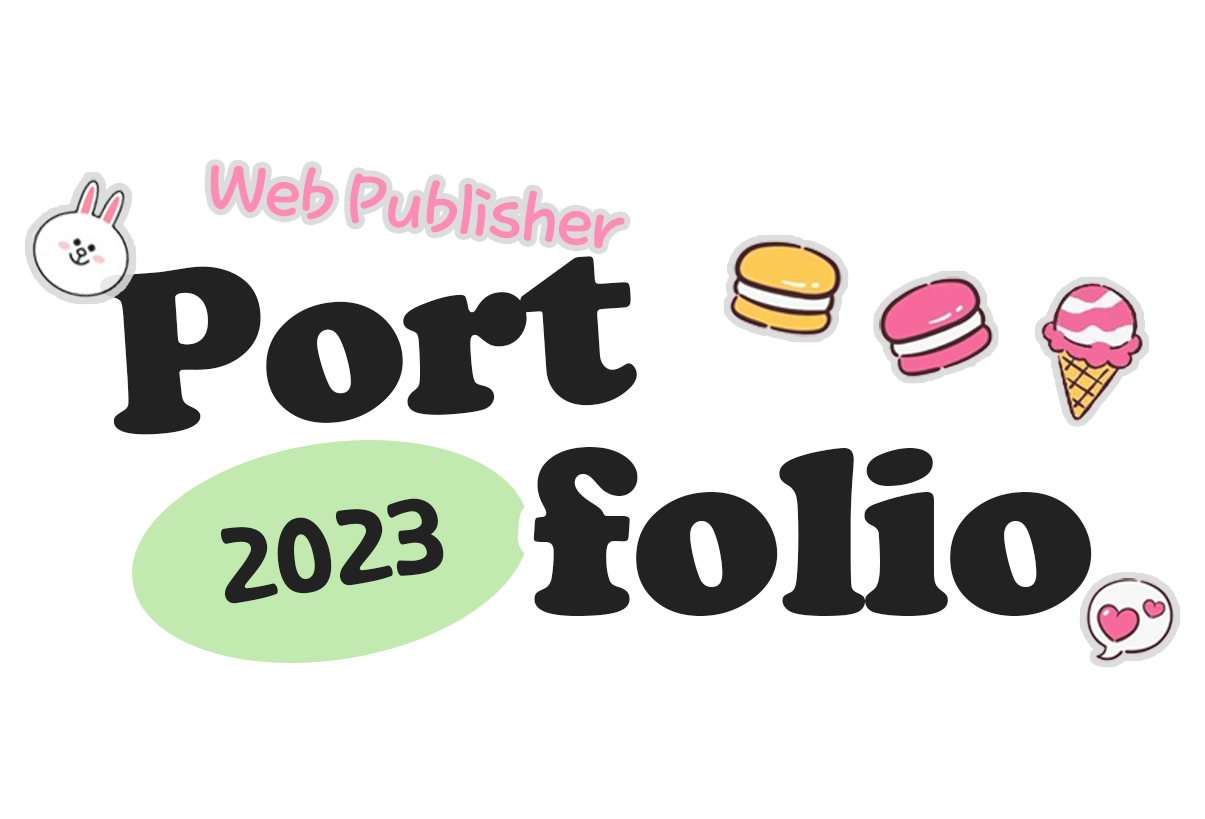
<style>
.page{position:relative;width:1205px;height:819px;background:#ffffff}
.page>*{position:absolute;margin:0}
.t1{font:78.7px "BazziRegular";letter-spacing:-0.02em;color:#fb84af}
.t2{font:240.5px "CooperBlack";letter-spacing:-0.02em;color:#222222}
.t3{font:248.5px "CooperBlack";letter-spacing:-0.02em;color:#222222}
.t4{font:104.2px "Katuri";letter-spacing:-0.02em;color:#222222}
</style>
<div class="page">
<p class="t1" style="left:210px;top:165px;width:415px;height:84px;rotate:6deg;opacity:0.93">Web Publisher</p>
<p class="t2" style="left:100px;top:256px;width:537px;height:179px;rotate:-4deg">Port</p>
<p class="t3" style="left:533px;top:447px;width:559px;height:169px">folio</p>
<p class="t4" style="left:220px;top:498px;width:224px;height:106px;rotate:-9deg">2023</p>
</div>
